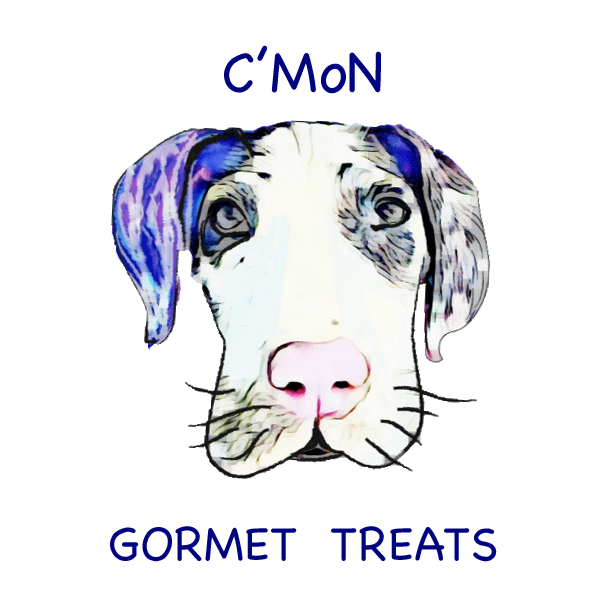
<style>
.page{position:relative;width:606px;height:606px;background:#ffffff}
.page>*{position:absolute;margin:0}
.t1{font:57.2px "Chalkboard";color:#000481;text-transform:uppercase}
.t2{font:57.2px "Chalkboard";color:#000481}
.t3{font:48px "Chalkboard";color:#000481;text-transform:uppercase}
</style>
<div class="page">
<p class="t1" style="left:224px;top:45px;width:157px;height:49px">C’M<span class="t2">o</span>n</p>
<p class="t3" style="left:110px;top:526px;width:387px;height:36px">Gormet  Treats</p>
</div>
